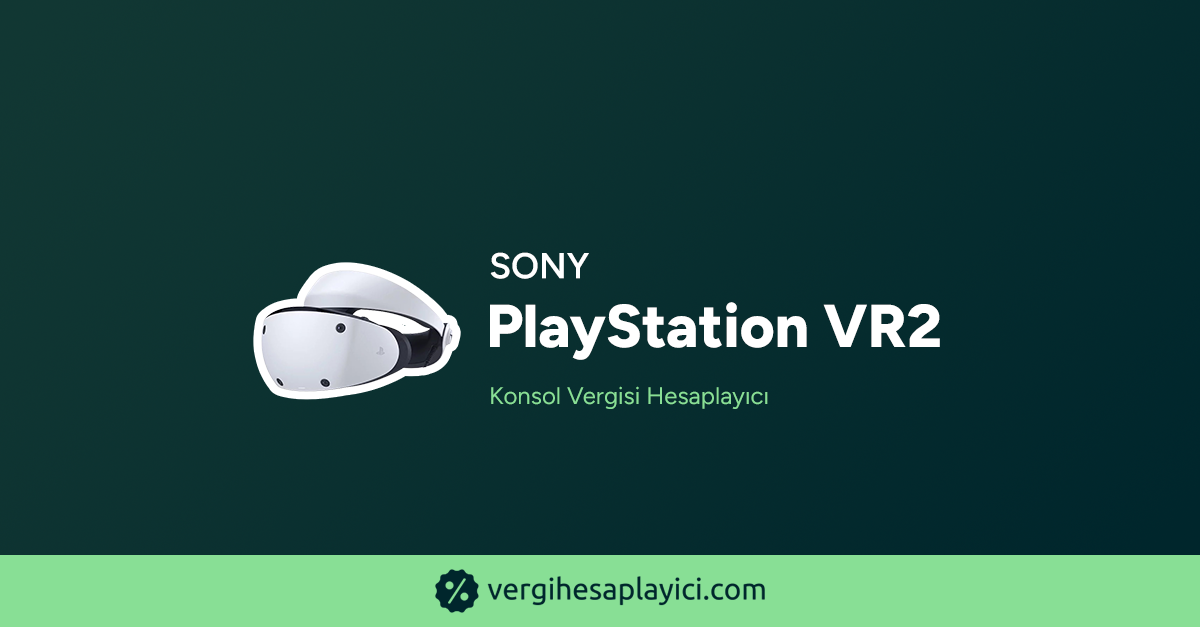
<style>
.page{position:relative;width:1200px;height:627px}
.page>*{position:absolute;margin:0}
.t1{font:36px "Figtree-SemiBold";color:#ffffff;text-transform:uppercase;font-weight:bold}
.t2{font:60.3px "Figtree-ExtraBold";color:#ffffff;font-weight:bold}
.t3{font:24px "Figtree-Regular";color:#88df95;font-weight:bold}
</style>
<div class="page">
<p class="t1" style="left:490px;top:252px;width:99px;height:27px">Sony</p>
<p class="t2" style="left:490px;top:302px;width:450px;height:58px">PlayStation VR2</p>
<p class="t3" style="left:491px;top:386px;width:277px;height:23px">Konsol Vergisi Hesaplayıcı</p>
</div>
